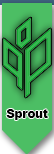
<style>
.page{position:relative;width:54px;height:154px;background:#4cbe64}
.page>*{position:absolute;margin:0}
.t1{font:11.7px "Arial-Black";letter-spacing:-0.01em;color:#000000}
</style>
<div class="page">
<p class="t1" style="left:6px;top:109px;width:42px;height:11px">Sprout</p>
</div>
